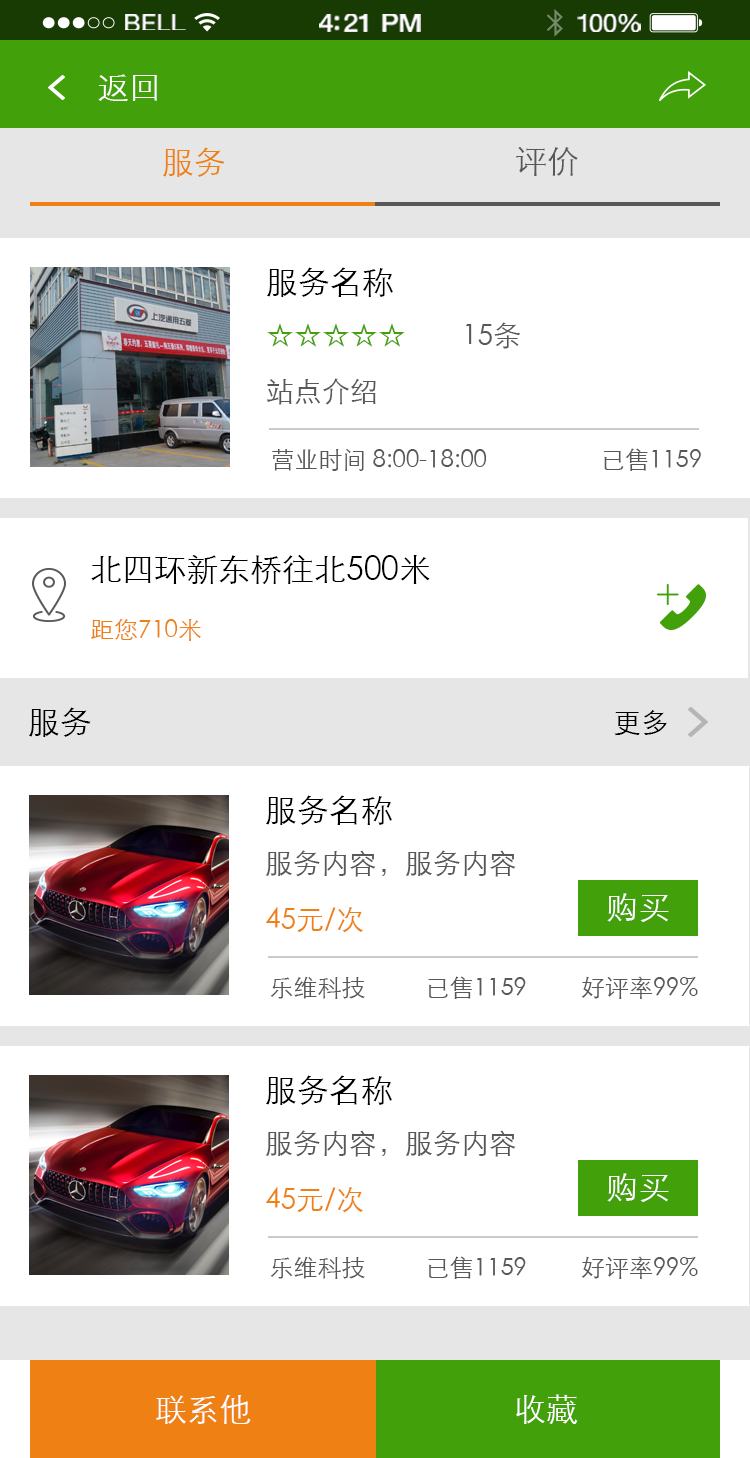
<style>
.page{position:relative;width:750px;height:1458px;background:#ffffff}
.page>*{position:absolute;margin:0}
.t1{font:23.3px "HelveticaNeue";letter-spacing:0.02em;color:#ffffff;scale:1.06 1}
.t2{font:25.3px "HelveticaNeue-Medium";letter-spacing:-0.02em;color:#ffffff;scale:1.06 1}
.t3{font:24.3px "HelveticaNeue";letter-spacing:-0.02em;color:#ffffff;scale:1.06 1}
.t4{font:32px "STXihei";color:#ffffff}
.t5{font:32px "STXihei";color:#ef8014}
.t6{font:32px "STXihei";color:#595757}
.t7{font:28px/56px "STXihei";color:#595757}
.t8{font:32px/56px "STXihei";color:#000000}
.t9{font:28px/56px "STXihei";color:#42a00a}
.t10{font:24px "STXihei";color:#595757}
.t11{font:32px "STXihei";color:#000000}
.t12{font:24px "STXihei";color:#ef8013}
.t13{font:28px "STXihei";color:#000000}
.t14{font:28px/56px "STXihei";color:#ef8013}
.t15{font:32px "STXihei";color:#fffefe}
</style>
<div class="page">
<p class="t1" style="left:125px;top:14px;width:61px;height:16px">BELL</p>
<p class="t2" style="left:319px;top:14px;width:102px;height:18px">4:21 PM</p>
<p class="t3" style="left:577px;top:14px;width:64px;height:18px">100%</p>
<p class="t4" style="left:98px;top:74px;width:59px;height:27px">返回</p>
<p class="t5" style="left:163px;top:147px;width:62px;height:30px">服务</p>
<p class="t6" style="left:516px;top:147px;width:62px;height:29px">评价</p>
<p class="t7" style="left:267px;top:267px;width:253px;height:138px"><span class="t8">服务名称<br></span><span class="t9">☆☆☆☆☆</span>        15条<br>站点介绍</p>
<p class="t10" style="left:272px;top:448px;width:429px;height:23px">营业时间 8:00-18:00                   已售1159</p>
<p class="t11" style="left:91px;top:555px;width:339px;height:30px">北四环新东桥往北500米</p>
<p class="t12" style="left:91px;top:618px;width:110px;height:23px">距您710米</p>
<p class="t11" style="left:29px;top:707px;width:62px;height:30px">服务</p>
<p class="t13" style="left:614px;top:710px;width:53px;height:26px">更多</p>
<p class="t7" style="left:265px;top:795px;width:251px;height:138px"><span class="t8">服务名称<br></span>服务内容，服务内容<br><span class="t14">45元/次</span></p>
<p class="t4" style="left:607px;top:893px;width:62px;height:29px">购买</p>
<p class="t10" style="left:270px;top:976px;width:428px;height:23px">乐维科技          已售1159         好评率99%</p>
<p class="t7" style="left:265px;top:1075px;width:251px;height:138px"><span class="t8">服务名称<br></span>服务内容，服务内容<br><span class="t14">45元/次</span></p>
<p class="t4" style="left:607px;top:1173px;width:62px;height:29px">购买</p>
<p class="t10" style="left:270px;top:1256px;width:428px;height:23px">乐维科技          已售1159         好评率99%</p>
<p class="t15" style="left:156px;top:1394px;width:95px;height:30px">联系他</p>
<p class="t15" style="left:516px;top:1394px;width:62px;height:30px">收藏</p>
</div>
